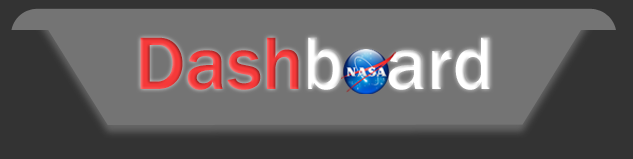
<style>
.page{position:relative;width:633px;height:159px;background:#747474}
.page>*{position:absolute;margin:0}
.t1{font:77px "FranklinGothic-Medium";color:#ffffff}
.t2{font:77px "FranklinGothic-Medium";color:#f63939}
</style>
<div class="page">
<p class="t1" style="left:140px;top:37px;width:350px;height:53px"><span class="t2">Dash</span>board</p>
</div>
